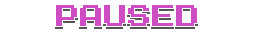
<style>
.page{position:relative;width:256px;height:32px;background:#ffffff}
.page>*{position:absolute;margin:0}
.t1{font:24px "MegaMan-2";color:#ce4dc5}
</style>
<div class="page">
<p class="t1" style="left:56px;top:5px;width:141px;height:21px">PAUSED</p>
</div>
